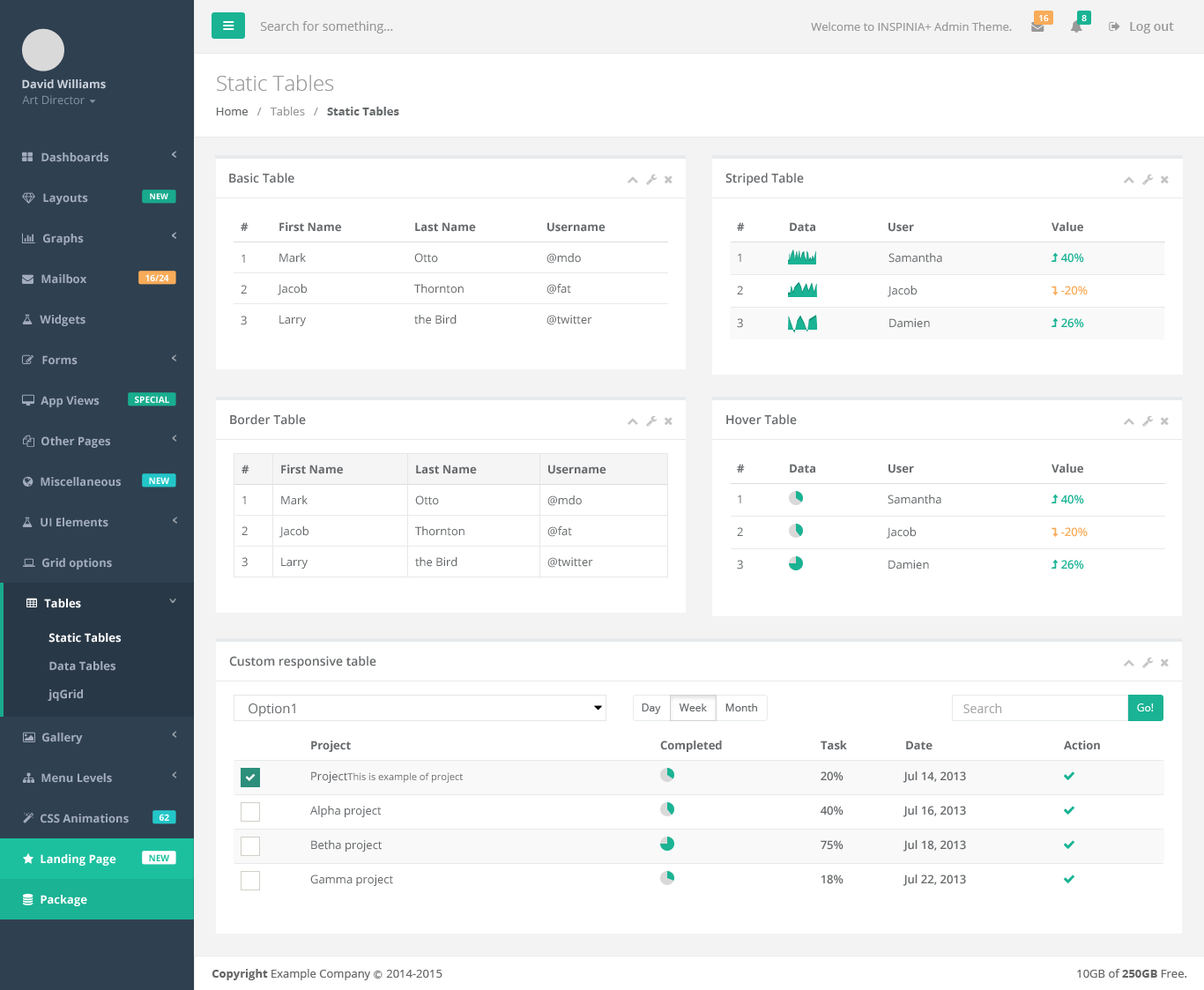
<style>
.page{position:relative;width:1204px;height:990px;background:#ffffff}
.page>*{position:absolute;margin:0}
.t1{font:8.8px "OpenSans-Semibold";color:#ffffff}
.t2{font:12.3px "OpenSans";color:#999999}
.t3{font:11.5px "OpenSans";color:#999999}
.t4{font:12.3px "OpenSans-Semibold";color:#999999}
.t5{font:21.2px "OpenSans-Light";color:#999999}
.t6{font:11.5px "OpenSans-Bold";color:#cad1db}
.t7{font:11.5px "OpenSans";color:#7d93a5}
.t8{font:11.5px "OpenSans";color:#676a6c}
.t9{font:11.5px "OpenSans-Bold";color:#676a6c}
.t10{font:11.5px "OpenSans-Bold";color:#a2acbd}
.t11{font:12.3px "OpenSans-Semibold";color:#676a6c}
.t12{font:7.9px "OpenSans-Bold";color:#fefefe}
.t13{font:11.5px "OpenSans-Semibold";color:#1ab394}
.t14{font:8.8px "OpenSans-Bold";color:#fefefe}
.t15{font:11.5px "OpenSans-Semibold";color:#f8ac59}
.t16{font:11.5px "OpenSans-Bold";color:#ffffff}
.t17{font:13.2px "OpenSans";color:#676a6c}
.t18{font:10.6px "OpenSans";color:#676a6c}
.t19{font:12.3px "OpenSans";color:#a9a9a9}
.t20{font:10.6px "OpenSans";color:#ffffff}
.t21{font:9.7px "OpenSans";color:#676a6c}
.t22{font:11.5px "OpenSans-Semibold";color:#676a6c}
.t23{font:8.8px "OpenSans-Bold";color:#1cc09f}
.t24{font:11.5px "OpenSans";color:#666666}
.t25{font:11.5px "OpenSans-Bold";color:#666666}
.t26{font:8.8px "Meiryo";color:#666666}
</style>
<div class="page">
<p class="t1" style="left:1039px;top:15px;width:10px;height:6px">16</p>
<p class="t1" style="left:1082px;top:15px;width:5px;height:6px">8</p>
<p class="t2" style="left:260px;top:21px;width:133px;height:13px">Search for something...</p>
<p class="t3" style="left:811px;top:22px;width:201px;height:9px">Welcome to INSPINIA+ Admin Theme.</p>
<p class="t4" style="left:1130px;top:22px;width:44px;height:12px">Log out</p>
<p class="t5" style="left:217px;top:75px;width:117px;height:16px">Static Tables</p>
<p class="t6" style="left:22px;top:79px;width:84px;height:10px">David Williams</p>
<p class="t7" style="left:22px;top:95px;width:63px;height:10px">Art Director</p>
<p class="t3" style="left:216px;top:107px;width:183px;height:8px"><span class="t8">Home</span>   /   Tables   / <span class="t9">  Static Tables</span></p>
<p class="t10" style="left:41px;top:153px;width:67px;height:9px">Dashboards</p>
<p class="t11" style="left:229px;top:173px;width:65px;height:10px">Basic Table</p>
<p class="t11" style="left:726px;top:173px;width:78px;height:13px">Striped Table</p>
<p class="t10" style="left:43px;top:193px;width:45px;height:12px">Layouts</p>
<p class="t12" style="left:150px;top:193px;width:18px;height:6px">NEW</p>
<p class="t10" style="left:43px;top:234px;width:41px;height:11px">Graphs</p>
<p class="t9" style="left:241px;top:222px;width:8px;height:9px">#</p>
<p class="t9" style="left:279px;top:222px;width:62px;height:10px">First Name</p>
<p class="t9" style="left:415px;top:222px;width:61px;height:10px">Last Name</p>
<p class="t9" style="left:548px;top:222px;width:58px;height:10px">Username</p>
<p class="t9" style="left:737px;top:222px;width:8px;height:9px">#</p>
<p class="t9" style="left:790px;top:222px;width:26px;height:10px">Data</p>
<p class="t9" style="left:889px;top:222px;width:25px;height:10px">User</p>
<p class="t9" style="left:1052px;top:222px;width:32px;height:10px">Value</p>
<p class="t8" style="left:242px;top:254px;width:3px;height:9px">1</p>
<p class="t8" style="left:279px;top:253px;width:27px;height:10px">Mark</p>
<p class="t8" style="left:414px;top:253px;width:24px;height:10px">Otto</p>
<p class="t8" style="left:547px;top:253px;width:34px;height:11px">@mdo</p>
<p class="t8" style="left:738px;top:253px;width:3px;height:9px">1</p>
<p class="t8" style="left:889px;top:253px;width:53px;height:10px">Samantha</p>
<p class="t13" style="left:1062px;top:253px;width:22px;height:10px">40%</p>
<p class="t10" style="left:41px;top:274px;width:45px;height:10px">Mailbox</p>
<p class="t14" style="left:145px;top:274px;width:24px;height:7px">16/24</p>
<p class="t8" style="left:241px;top:285px;width:6px;height:9px">2</p>
<p class="t8" style="left:278px;top:284px;width:29px;height:11px">Jacob</p>
<p class="t8" style="left:414px;top:284px;width:50px;height:10px">Thornton</p>
<p class="t8" style="left:547px;top:284px;width:24px;height:10px">@fat</p>
<p class="t8" style="left:737px;top:286px;width:6px;height:8px">2</p>
<p class="t8" style="left:888px;top:286px;width:29px;height:11px">Jacob</p>
<p class="t15" style="left:1062px;top:286px;width:26px;height:9px">-20%</p>
<p class="t10" style="left:40px;top:315px;width:46px;height:11px">Widgets</p>
<p class="t8" style="left:241px;top:316px;width:6px;height:9px">3</p>
<p class="t8" style="left:279px;top:315px;width:27px;height:11px">Larry</p>
<p class="t8" style="left:414px;top:315px;width:43px;height:9px">the Bird</p>
<p class="t8" style="left:547px;top:315px;width:45px;height:10px">@twitter</p>
<p class="t8" style="left:737px;top:318px;width:6px;height:10px">3</p>
<p class="t8" style="left:890px;top:318px;width:40px;height:10px">Damien</p>
<p class="t13" style="left:1062px;top:318px;width:22px;height:10px">26%</p>
<p class="t10" style="left:42px;top:355px;width:36px;height:10px">Forms</p>
<p class="t10" style="left:41px;top:396px;width:59px;height:11px">App Views</p>
<p class="t14" style="left:135px;top:396px;width:34px;height:7px">SPECIAL</p>
<p class="t11" style="left:230px;top:414px;width:76px;height:11px">Border Table</p>
<p class="t11" style="left:726px;top:414px;width:71px;height:11px">Hover Table</p>
<p class="t10" style="left:41px;top:436px;width:69px;height:12px">Other Pages</p>
<p class="t9" style="left:242px;top:465px;width:8px;height:8px">#</p>
<p class="t9" style="left:281px;top:465px;width:62px;height:9px">First Name</p>
<p class="t9" style="left:416px;top:465px;width:61px;height:9px">Last Name</p>
<p class="t9" style="left:548px;top:465px;width:59px;height:9px">Username</p>
<p class="t9" style="left:737px;top:464px;width:8px;height:9px">#</p>
<p class="t9" style="left:790px;top:464px;width:26px;height:9px">Data</p>
<p class="t9" style="left:889px;top:464px;width:25px;height:9px">User</p>
<p class="t9" style="left:1052px;top:464px;width:32px;height:9px">Value</p>
<p class="t10" style="left:41px;top:477px;width:80px;height:10px">Miscellaneous</p>
<p class="t14" style="left:149px;top:477px;width:20px;height:7px">NEW</p>
<p class="t8" style="left:242px;top:495px;width:4px;height:9px">1</p>
<p class="t8" style="left:281px;top:495px;width:27px;height:10px">Mark</p>
<p class="t8" style="left:415px;top:495px;width:24px;height:10px">Otto</p>
<p class="t8" style="left:548px;top:495px;width:34px;height:11px">@mdo</p>
<p class="t8" style="left:738px;top:495px;width:3px;height:8px">1</p>
<p class="t8" style="left:888px;top:495px;width:54px;height:9px">Samantha</p>
<p class="t13" style="left:1062px;top:495px;width:22px;height:9px">40%</p>
<p class="t10" style="left:41px;top:518px;width:67px;height:9px">UI Elements</p>
<p class="t8" style="left:242px;top:526px;width:6px;height:9px">2</p>
<p class="t8" style="left:279px;top:526px;width:30px;height:12px">Jacob</p>
<p class="t8" style="left:415px;top:526px;width:50px;height:10px">Thornton</p>
<p class="t8" style="left:548px;top:526px;width:24px;height:11px">@fat</p>
<p class="t8" style="left:737px;top:527px;width:6px;height:9px">2</p>
<p class="t8" style="left:887px;top:527px;width:29px;height:12px">Jacob</p>
<p class="t15" style="left:1062px;top:527px;width:26px;height:10px">-20%</p>
<p class="t8" style="left:242px;top:557px;width:6px;height:10px">3</p>
<p class="t8" style="left:281px;top:557px;width:27px;height:12px">Larry</p>
<p class="t8" style="left:415px;top:557px;width:43px;height:10px">the Bird</p>
<p class="t8" style="left:548px;top:557px;width:45px;height:11px">@twitter</p>
<p class="t10" style="left:42px;top:558px;width:70px;height:12px">Grid options</p>
<p class="t8" style="left:737px;top:560px;width:6px;height:10px">3</p>
<p class="t8" style="left:889px;top:560px;width:40px;height:10px">Damien</p>
<p class="t13" style="left:1062px;top:560px;width:22px;height:10px">26%</p>
<p class="t16" style="left:44px;top:599px;width:37px;height:9px">Tables</p>
<p class="t16" style="left:48px;top:633px;width:73px;height:10px">Static Tables</p>
<p class="t10" style="left:49px;top:661px;width:66px;height:10px">Data Tables</p>
<p class="t11" style="left:229px;top:656px;width:147px;height:13px">Custom responsive table</p>
<p class="t10" style="left:48px;top:689px;width:35px;height:12px">jqGrid</p>
<p class="t17" style="left:249px;top:704px;width:46px;height:13px">Option1</p>
<p class="t18" style="left:642px;top:704px;width:19px;height:10px">Day</p>
<p class="t18" style="left:679px;top:704px;width:28px;height:8px">Week</p>
<p class="t18" style="left:726px;top:704px;width:31px;height:8px">Month</p>
<p class="t19" style="left:964px;top:704px;width:38px;height:9px">Search</p>
<p class="t20" style="left:1137px;top:704px;width:17px;height:8px">Go!</p>
<p class="t10" style="left:42px;top:733px;width:41px;height:11px">Gallery</p>
<p class="t9" style="left:311px;top:741px;width:40px;height:11px">Project</p>
<p class="t9" style="left:660px;top:741px;width:62px;height:11px">Completed</p>
<p class="t9" style="left:821px;top:741px;width:26px;height:9px">Task</p>
<p class="t9" style="left:906px;top:741px;width:27px;height:9px">Date</p>
<p class="t9" style="left:1064px;top:741px;width:36px;height:9px">Action</p>
<p class="t10" style="left:41px;top:773px;width:71px;height:10px">Menu Levels</p>
<p class="t21" style="left:311px;top:771px;width:152px;height:12px"><span class="t8">Project</span>This is example of project</p>
<p class="t22" style="left:821px;top:771px;width:23px;height:10px">20%</p>
<p class="t22" style="left:903px;top:771px;width:63px;height:12px">Jul 14, 2013</p>
<p class="t8" style="left:310px;top:806px;width:72px;height:11px">Alpha project</p>
<p class="t22" style="left:821px;top:806px;width:23px;height:10px">40%</p>
<p class="t22" style="left:903px;top:806px;width:63px;height:11px">Jul 16, 2013</p>
<p class="t10" style="left:41px;top:814px;width:88px;height:9px">CSS Animations</p>
<p class="t14" style="left:159px;top:814px;width:10px;height:7px">62</p>
<p class="t8" style="left:311px;top:840px;width:71px;height:12px">Betha project</p>
<p class="t22" style="left:821px;top:840px;width:23px;height:10px">75%</p>
<p class="t22" style="left:903px;top:840px;width:63px;height:12px">Jul 18, 2013</p>
<p class="t16" style="left:41px;top:854px;width:75px;height:12px">Landing Page</p>
<p class="t23" style="left:149px;top:854px;width:20px;height:7px">NEW</p>
<p class="t8" style="left:310px;top:875px;width:83px;height:11px">Gamma project</p>
<p class="t22" style="left:821px;top:875px;width:23px;height:9px">18%</p>
<p class="t22" style="left:903px;top:875px;width:63px;height:11px">Jul 22, 2013</p>
<p class="t16" style="left:41px;top:895px;width:46px;height:11px">Package</p>
<p class="t24" style="left:212px;top:969px;width:231px;height:11px"><span class="t25">Copyright</span> Example Company <span class="t26">Ⓒ </span>2014-2015</p>
<p class="t24" style="left:1077px;top:969px;width:111px;height:9px">10GB of <span class="t25">250GB</span> Free.</p>
</div>
